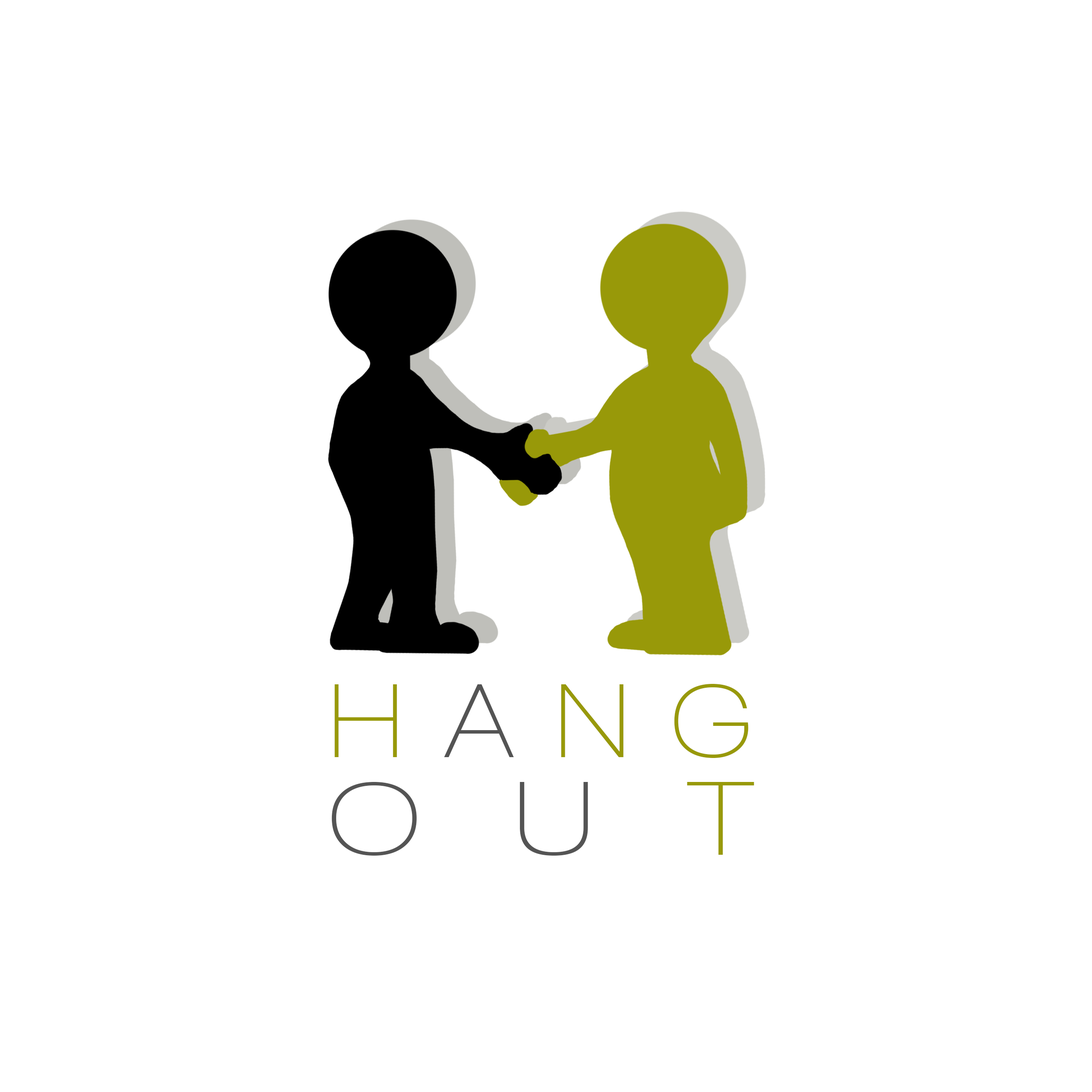
<style>
.page{position:relative;width:1092px;height:1092px;background:#ffffff}
.page>*{position:absolute;margin:0}
.t1{font:107.1px "WalkwaySemiBold";letter-spacing:0.4em;color:#989909}
.t2{font:107.1px "WalkwaySemiBold";letter-spacing:0.4em;color:#545454}
.t3{font:107.1px "WalkwaySemiBold";letter-spacing:0.78em;color:#545454;scale:1.13 1}
.t4{font:107.1px "WalkwaySemiBold";letter-spacing:1.12em;color:#989909;scale:1.13 1}
</style>
<div class="page">
<p class="t1" style="left:334px;top:684px;width:415px;height:74px">H<span class="t2">A</span>NG</p>
<p class="t3" style="left:331px;top:782px;width:423px;height:74px">OU<span class="t4">T</span></p>
</div>
